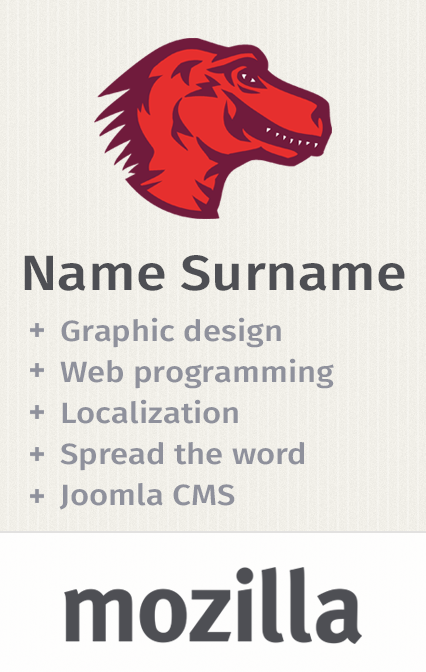
<style>
.page{position:relative;width:426px;height:672px}
.page>*{position:absolute;margin:0}
.t1{font:49.6px "FiraSansMedium";color:#4e4f54;scale:1.12 1}
.t2{font:29.2px/41px "FiraSansMedium";color:#8f919c;scale:1.12 1}
</style>
<div class="page">
<p class="t1" style="left:24px;top:255px;width:381px;height:36px">Name Surname</p>
<p class="t2" style="left:59px;top:317px;width:275px;height:193px">Graphic design<br>Web programming<br>Localization<br>Spread the word<br>Joomla CMS</p>
</div>
